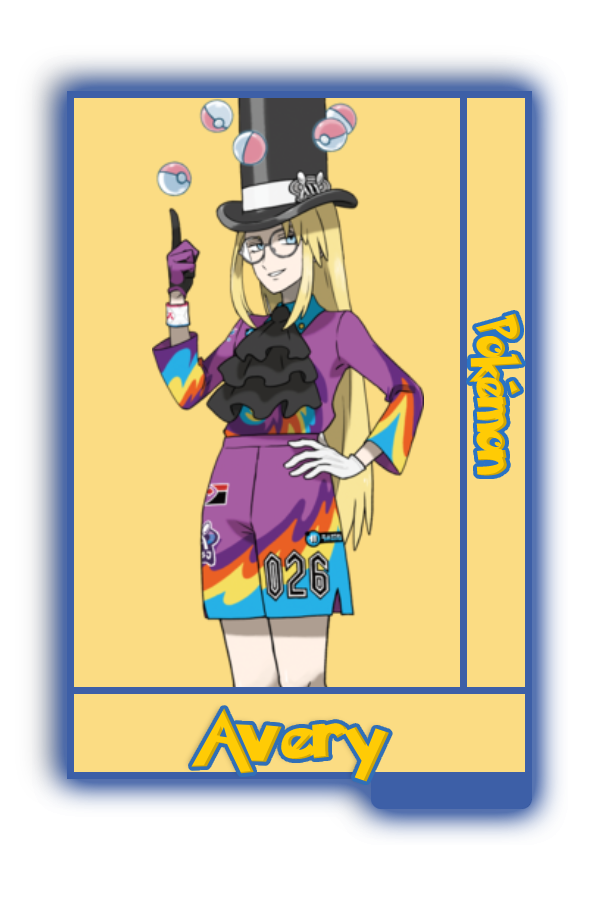
<style>
.page{position:relative;width:600px;height:900px;background:#fbdc83}
.page>*{position:absolute;margin:0}
.t1{font:48.8px "PokemonSolidNormal";color:#ffcb05;scale:0.8 1}
.t2{font:55.2px "PokemonSolidNormal";color:#ffcb05;scale:1.12 1}
</style>
<div class="page">
<p class="t1" style="left:469px;top:313px;width:54px;height:163px;rotate:90deg">Pokémon</p>
<p class="t2" style="left:191px;top:708px;width:198px;height:74px">Avery</p>
</div>
